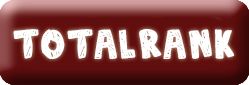
<style>
.page{position:relative;width:249px;height:85px}
.page>*{position:absolute;margin:0}
.t1{font:42.6px "DENNE|Sketchy";letter-spacing:-0.025em;color:#ffffff}
</style>
<div class="page">
<p class="t1" style="left:13px;top:29px;width:222px;height:30px">TOTALRANK</p>
</div>
